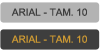
<style>
.page{position:relative;width:100px;height:52px;background:#3e3e3e}
.page>*{position:absolute;margin:0}
.t1{font:10px "ArialMT";color:#3e3e3e}
.t2{font:10px "ArialMT";color:#cb9833}
</style>
<div class="page">
<p class="t1" style="left:11px;top:8px;width:76px;height:8px">ARIAL - TAM. 10</p>
<p class="t2" style="left:11px;top:35px;width:76px;height:8px">ARIAL - TAM. 10</p>
</div>
